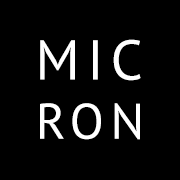
<style>
.page{position:relative;width:180px;height:180px;background:#000000}
.page>*{position:absolute;margin:0}
.t1{font:56px "PTSans-Regular";letter-spacing:0.05em;color:#ffffff;text-transform:uppercase}
.t2{font:50px "PTSans-Regular";letter-spacing:0.05em;color:#ffffff;text-transform:uppercase}
</style>
<div class="page">
<p class="t1" style="left:40px;top:39px;width:101px;height:42px">mic</p>
<p class="t2" style="left:40px;top:103px;width:100px;height:37px">ron</p>
</div>
